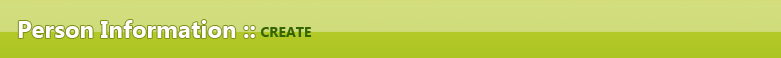
<style>
.page{position:relative;width:781px;height:58px}
.page>*{position:absolute;margin:0}
.t1{font:24px "SegoeUI-Bold";color:#fefefe}
.t2{font:14px "SegoeUI-Bold";color:#336600}
</style>
<div class="page">
<p class="t1" style="left:18px;top:20px;width:237px;height:18px">Person Information ::</p>
<p class="t2" style="left:260px;top:27px;width:52px;height:10px">CREATE</p>
</div>
